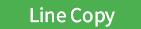
<style>
.page{position:relative;width:141px;height:29px;background:#4caf50}
.page>*{position:absolute;margin:0}
.t1{font:21px "SourceSansRoman-Regular";color:#ffffff}
</style>
<div class="page">
<p class="t1" style="left:30px;top:7px;width:85px;height:20px">Line Copy</p>
</div>
